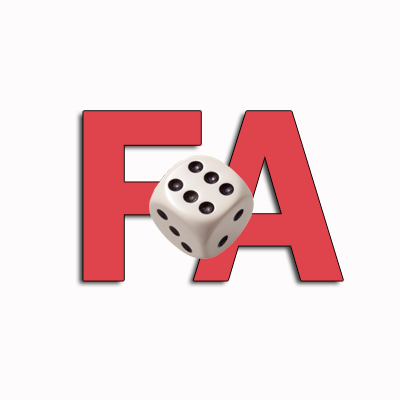
<style>
.page{position:relative;width:400px;height:400px;background:#fdfbfc}
.page>*{position:absolute;margin:0}
.t1{font:253.5px "FranklinGothic-Demi";color:#df444c}
</style>
<div class="page">
<p class="t1" style="left:83px;top:111px;width:260px;height:170px">FA</p>
</div>
